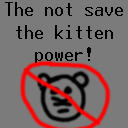
<style>
.page{position:relative;width:128px;height:128px;background:#7b7b7b}
.page>*{position:absolute;margin:0}
.t1{font:18.7px "Terminal";color:#000000}
</style>
<div class="page">
<p class="t1" style="left:5px;top:2px;width:118px;height:61px;text-align:center">The not save the kitten power!</p>
</div>
